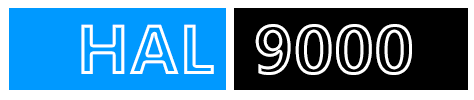
<style>
.page{position:relative;width:474px;height:100px;background:#0099ff}
.page>*{position:absolute;margin:0}
.t1{font:70px "SegoeWP-Bold"}
</style>
<div class="page">
<p class="t1" style="left:81px;top:24px;width:331px;height:51px">HAL  9000</p>
</div>
